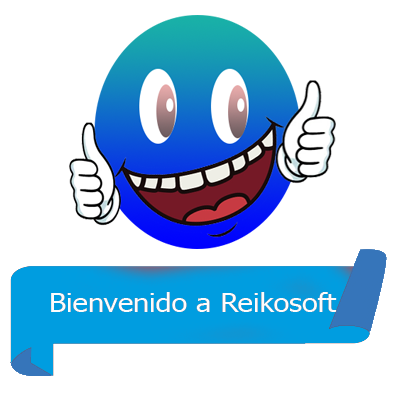
<style>
.page{position:relative;width:400px;height:400px;background:#ffffff}
.page>*{position:absolute;margin:0}
.t1{font:25px "Tahoma";color:#fcfcfd;scale:1.15 1}
</style>
<div class="page">
<p class="t1" style="left:51px;top:292px;width:286px;height:20px">Bienvenido a Reikosoft</p>
<p class="t1" style="left:51px;top:292px;width:286px;height:20px">Bienvenido a Reikosoft</p>
</div>
